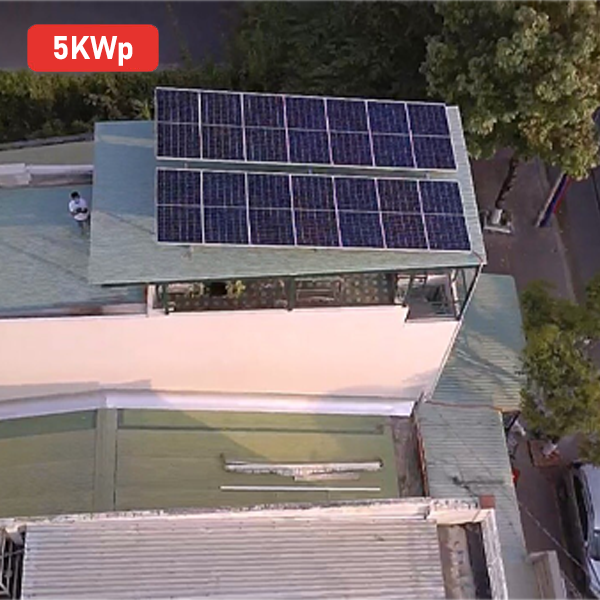
<style>
.page{position:relative;width:600px;height:600px}
.page>*{position:absolute;margin:0}
.t1{font:32.2px "Bahnschrift-Bold";color:#ffffff}
</style>
<div class="page">
<p class="t1" style="left:54px;top:36px;width:79px;height:30px">5KWp</p>
</div>
